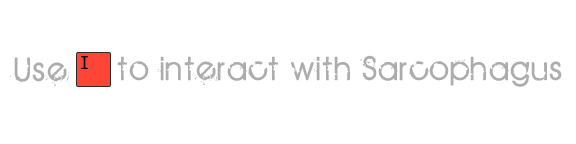
<style>
.page{position:relative;width:576px;height:144px;background:#ffffff}
.page>*{position:absolute;margin:0}
.t1{font:36px "BIRTHOFAHERO";letter-spacing:0.075em;color:#acacac}
</style>
<div class="page">
<p class="t1" style="left:9px;top:57px;width:61px;height:29px">Use</p>
<p class="t1" style="left:117px;top:55px;width:445px;height:32px">to interact with Sarcophagus</p>
</div>
